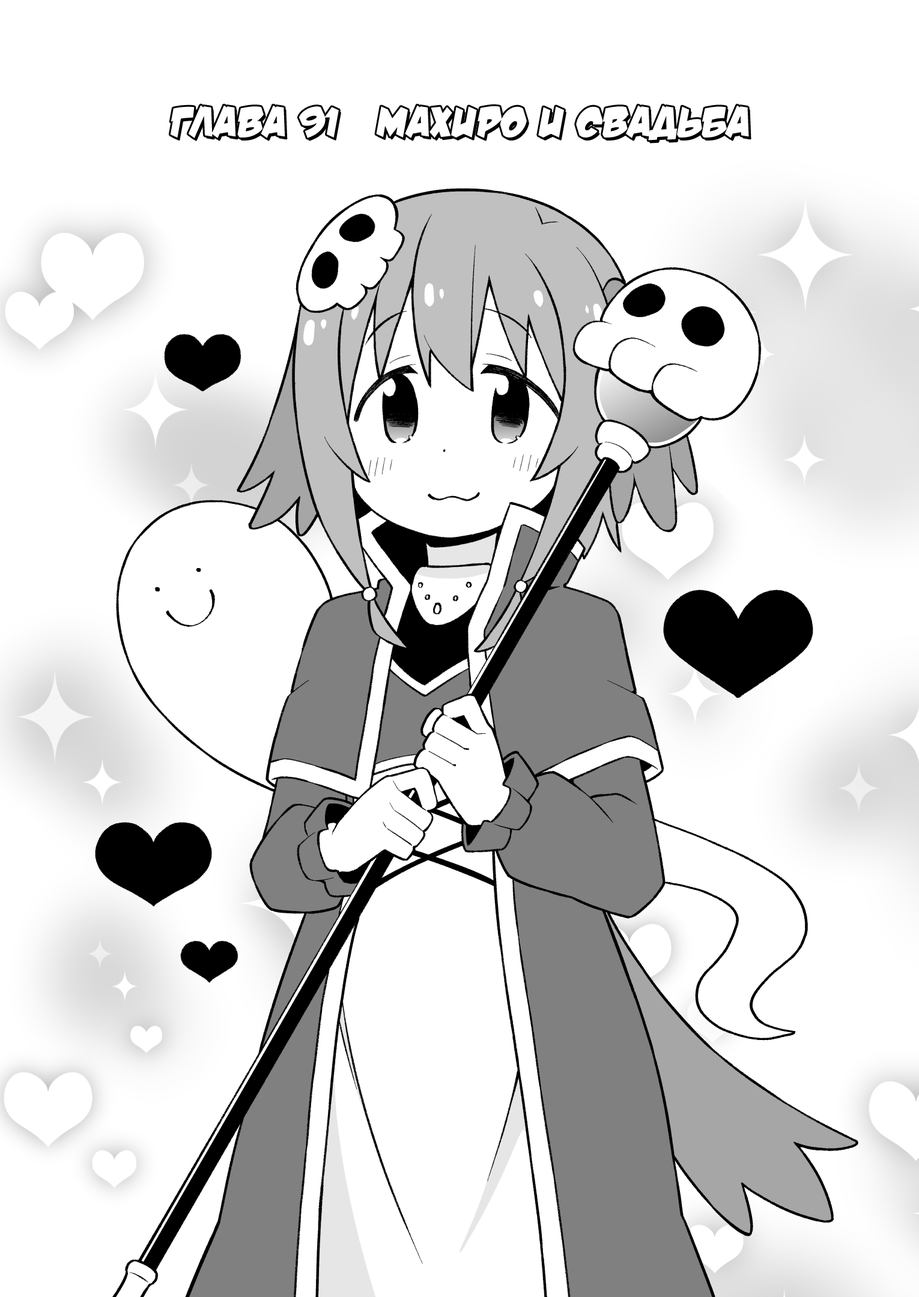
<style>
.page{position:relative;width:919px;height:1297px;background:#ffffff}
.page>*{position:absolute;margin:0}
.t1{font:43.2px "v_DamnNoisyKids";color:#ffffff;text-transform:uppercase}
</style>
<div class="page">
<p class="t1" style="left:170px;top:105px;width:579px;height:36px">Глава 91   Махиро и свадьба</p>
</div>
